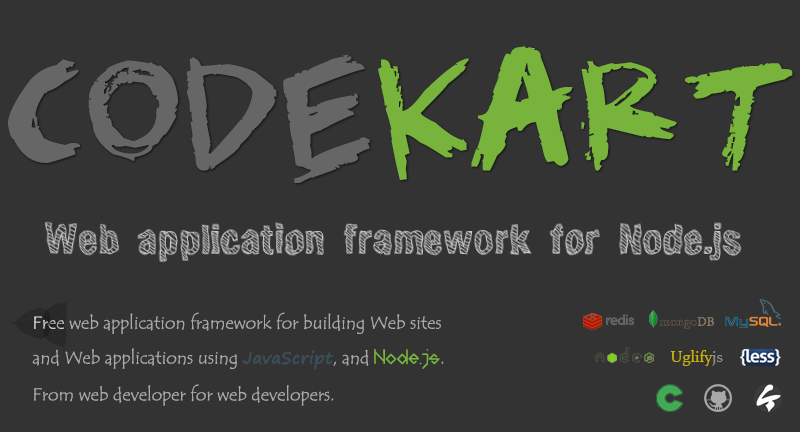
<style>
.page{position:relative;width:800px;height:432px;background:#333333}
.page>*{position:absolute;margin:0}
.t1{font:90px "ScribbleScrawl";color:#666666}
.t2{font:90px "ScribbleScrawl";color:#78b43c}
.t3{font:18px "TempusSansITC";color:#abaaaa}
.t4{font:18px "TempusSansITC";color:#ffffff}
.t5{font:16px "SegoePrint";color:#3b4e58;font-weight:bold}
.t6{font:23px "Pantheon";color:#78b43c;font-weight:bold}
.t7{font:16px "Constantia";color:#cab106}
.t8{font:16px "Constantia";color:#8d8b8b}
</style>
<div class="page">
<p class="t1" style="left:7px;top:46px;width:786px;height:137px">Code<span class="t2">kart</span></p>
<p class="t3" style="left:32px;top:312px;width:412px;height:94px"><span class="t4">Free</span> web application framework for building Web sites <br>and Web applications using <span class="t5">JavaScript</span>, and <span class="t6">Node.js</span>. <br>From web developer for web developers.</p>
<p class="t7" style="left:670px;top:350px;width:53px;height:16px">Uglify<span class="t8">js</span></p>
</div>
